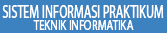
<style>
.page{position:relative;width:167px;height:33px;background:#3c82c0}
.page>*{position:absolute;margin:0}
.t1{font:18.1px "MyriadHebrew-Regular";color:#ffffff;scale:0.68 1}
.t2{font:14.1px "MyriadHebrew-Regular";color:#ffffff;scale:0.78 1}
</style>
<div class="page">
<p class="t1" style="left:2px;top:5px;width:162px;height:13px">SISTEM INFORMASI PRAKTIKUM</p>
<p class="t2" style="left:33px;top:20px;width:101px;height:10px">TEKNIK INFORMATIKA</p>
</div>
